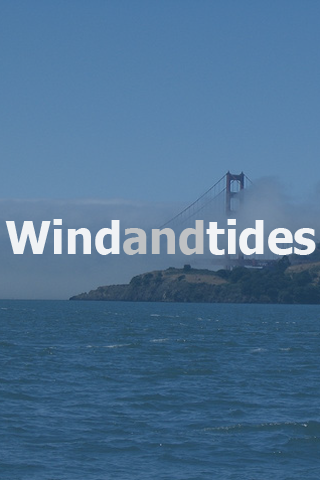
<style>
.page{position:relative;width:320px;height:480px}
.page>*{position:absolute;margin:0}
.t1{font:45px "Tahoma-Bold";color:#ffffff}
.t2{font:45px "Tahoma-Bold";color:#fefefe}
.t3{font:45px "Tahoma-Bold";color:#c8c8c8}
</style>
<div class="page">
<p class="t1" style="left:5px;top:219px;width:311px;height:36px;opacity:0.91"><span class="t2">Wind</span><span class="t3">and</span>tides</p>
</div>
